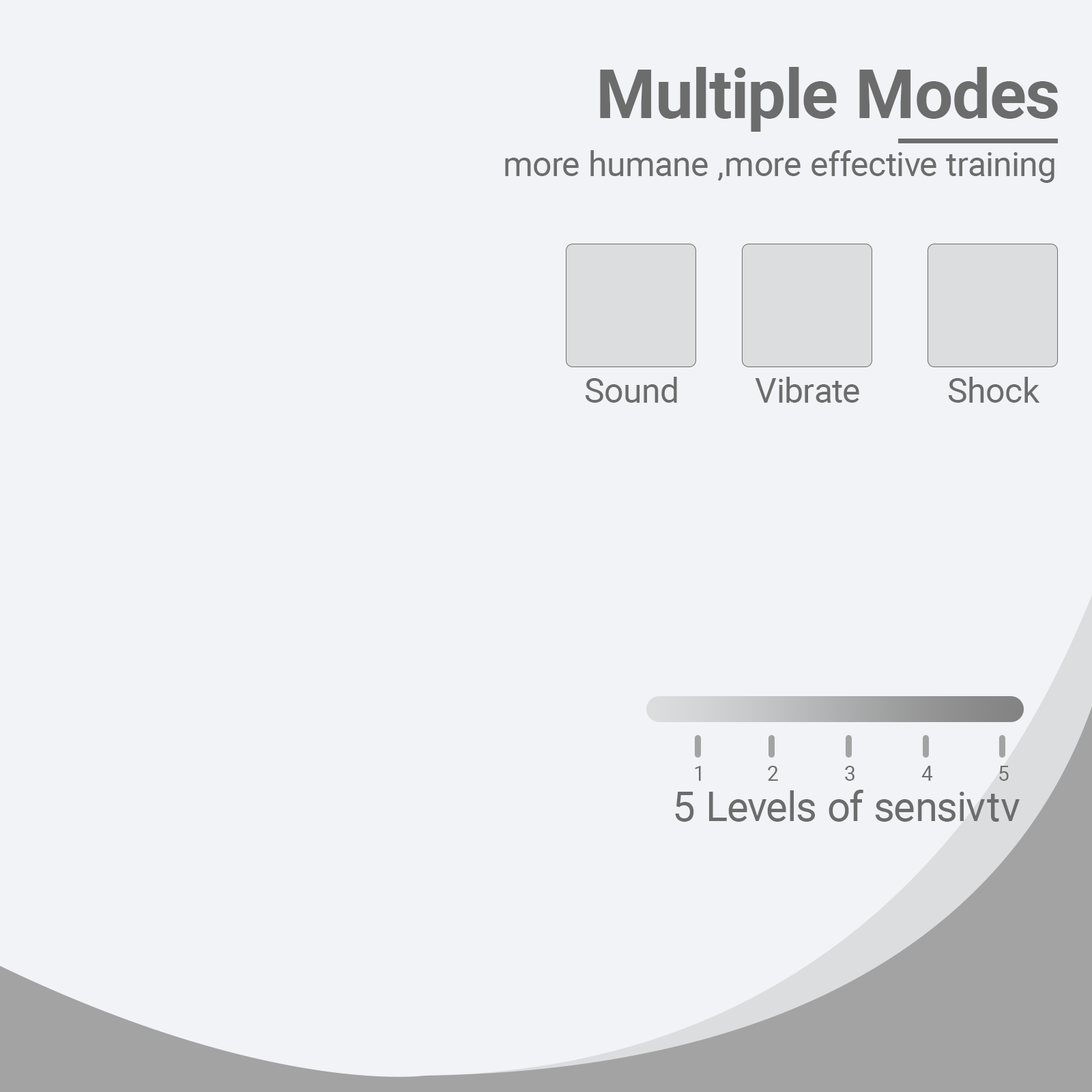
<style>
.page{position:relative;width:1092px;height:1092px;background:#f2f3f6}
.page>*{position:absolute;margin:0}
.t1{font:68.2px "Roboto-Bold";color:#6c6c6c}
.t2{font:34.1px "Roboto-Regular";color:#6c6c6c}
.t3{font:20.5px "Roboto-Regular";color:#6c6c6c}
.t4{font:40.9px "Roboto-Regular";color:#6c6c6c}
</style>
<div class="page">
<p class="t1" style="left:600px;top:67px;width:458px;height:65px">Multiple Modes</p>
<p class="t2" style="left:505px;top:150px;width:549px;height:33px">more humane ,more effective training</p>
<p class="t2" style="left:586px;top:377px;width:91px;height:26px">Sound</p>
<p class="t2" style="left:755px;top:377px;width:104px;height:26px">Vibrate</p>
<p class="t2" style="left:949px;top:377px;width:91px;height:26px">Shock</p>
<p class="t3" style="left:695px;top:766px;width:6px;height:15px">1</p>
<p class="t3" style="left:768px;top:766px;width:10px;height:15px">2</p>
<p class="t3" style="left:845px;top:766px;width:9px;height:15px">3</p>
<p class="t3" style="left:921px;top:766px;width:12px;height:15px">4</p>
<p class="t3" style="left:999px;top:766px;width:10px;height:15px">5</p>
<p class="t4" style="left:675px;top:790px;width:345px;height:32px">5 Levels of sensivtv</p>
</div>
